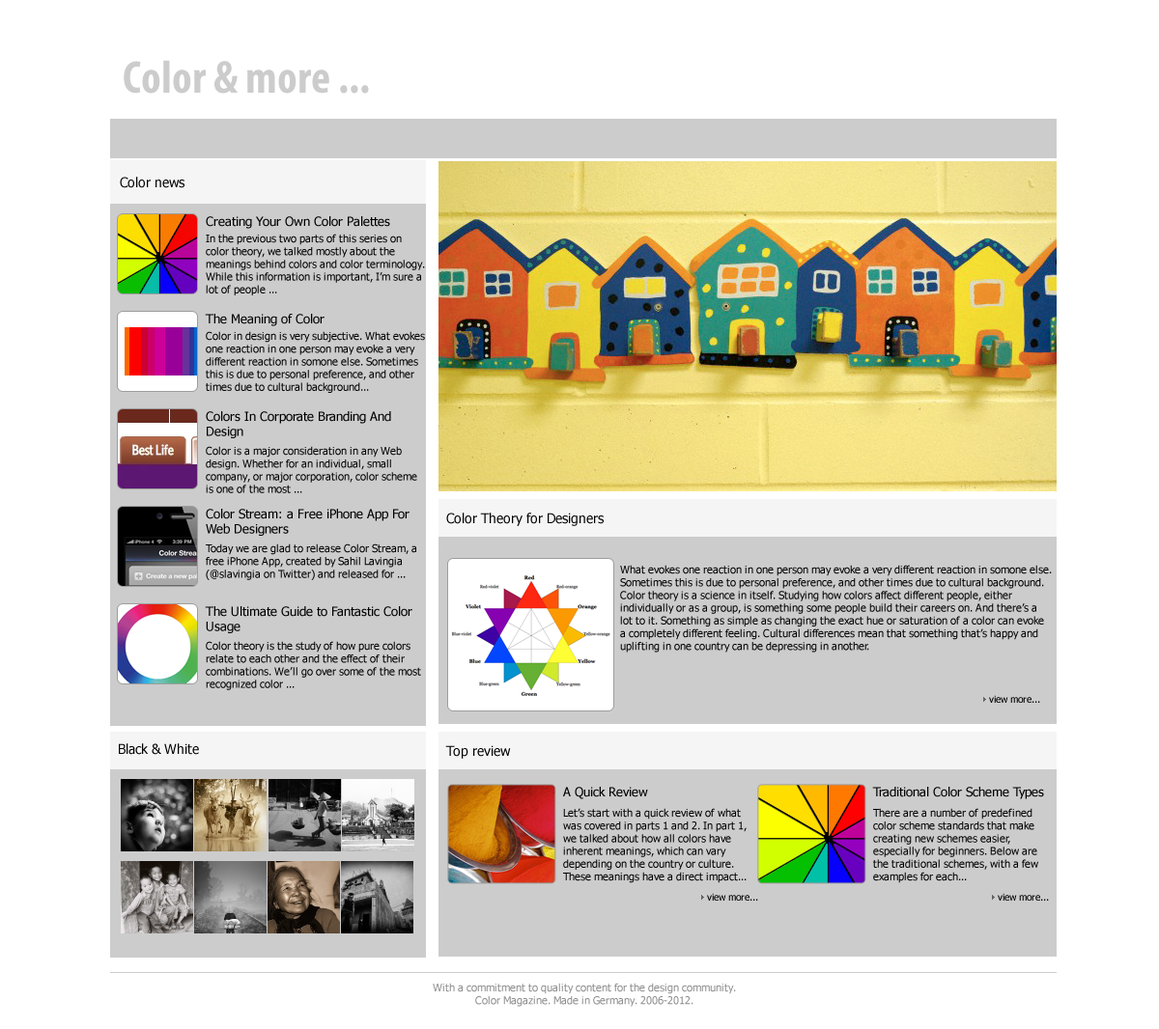
<style>
.page{position:relative;width:1159px;height:1029px;background:#ffffff}
.page>*{position:absolute;margin:0}
.t1{font:46.3px "MyriadPro-BoldCond";color:#cccccc}
.t2{font:13.5px "Tahoma";color:#000000}
.t3{font:12.6px "Tahoma";color:#000000}
.t4{font:10.6px "Tahoma";color:#000000}
.t5{font:9.7px "Tahoma";color:#000000}
.t6{font:13.5px "Tahoma";color:#020202}
.t7{font:10.6px "Tahoma";color:#8e8d8d}
</style>
<div class="page">
<p class="t1" style="left:124px;top:60px;width:245px;height:34px">Color &amp; more ...</p>
<p class="t2" style="left:120px;top:177px;width:64px;height:11px">Color news</p>
<p class="t3" style="left:206px;top:216px;width:184px;height:13px">Creating Your Own Color Palettes</p>
<p class="t4" style="left:206px;top:234px;width:219px;height:61px">In the previous two parts of this series on <br>color theory, we talked mostly about the <br>meanings behind colors and color terminology. <br>While this information is important, I’m sure a <br>lot of people ...</p>
<p class="t3" style="left:205px;top:314px;width:119px;height:12px">The Meaning of Color</p>
<p class="t4" style="left:206px;top:331px;width:219px;height:62px">Color in design is very subjective. What evokes <br>one reaction in one person may evoke a very <br>different reaction in somone else. Sometimes <br>this is due to personal preference, and other <br>times due to cultural background...</p>
<p class="t3" style="left:206px;top:411px;width:185px;height:27px">Colors In Corporate Branding And <br>Design</p>
<p class="t4" style="left:206px;top:446px;width:211px;height:47px">Color is a major consideration in any Web <br>design. Whether for an individual, small <br>company, or major corporation, color scheme <br>is one of the most ...</p>
<p class="t3" style="left:206px;top:509px;width:203px;height:27px">Color Stream: a Free iPhone App For <br>Web Designers</p>
<p class="t2" style="left:446px;top:513px;width:157px;height:13px">Color Theory for Designers</p>
<p class="t4" style="left:206px;top:544px;width:210px;height:36px">Today we are glad to release Color Stream, a <br>free iPhone App, created by Sahil Lavingia <br>(@slavingia on Twitter) and released for ...</p>
<p class="t4" style="left:620px;top:565px;width:431px;height:88px">What evokes one reaction in one person may evoke a very different reaction in somone else. <br>Sometimes this is due to personal preference, and other times due to cultural background. <br>Color theory is a science in itself. Studying how colors affect different people, either <br>individually or as a group, is something some people build their careers on. And there’s a <br>lot to it. Something as simple as changing the exact hue or saturation of a color can evoke <br>a completely different feeling. Cultural differences mean that something that’s happy and <br>uplifting in one country can be depressing in another.</p>
<p class="t3" style="left:205px;top:606px;width:207px;height:27px">The Ultimate Guide to Fantastic Color <br>Usage</p>
<p class="t4" style="left:206px;top:641px;width:215px;height:49px">Color theory is the study of how pure colors <br>relate to each other and the effect of their <br>combinations. We’ll go over some of the most <br>recognized color ...</p>
<p class="t5" style="left:989px;top:695px;width:51px;height:8px">view more...</p>
<p class="t6" style="left:119px;top:743px;width:80px;height:12px">Black &amp; White</p>
<p class="t2" style="left:445px;top:745px;width:66px;height:14px">Top review</p>
<p class="t3" style="left:563px;top:787px;width:85px;height:12px">A Quick Review</p>
<p class="t3" style="left:872px;top:787px;width:172px;height:12px">Traditional Color Scheme Types</p>
<p class="t4" style="left:563px;top:808px;width:183px;height:75px">Let’s start with a quick review of what<br>was covered in parts 1 and 2. In part 1, <br>we talked about how all colors have <br>inherent meanings, which can vary <br>depending on the country or culture. <br>These meanings have a direct impact...</p>
<p class="t4" style="left:873px;top:808px;width:165px;height:75px">There are a number of predefined <br>color scheme standards that make <br>creating new schemes easier, <br>especially for beginners. Below are <br>the traditional schemes, with a few <br>examples for each...</p>
<p class="t5" style="left:707px;top:893px;width:51px;height:8px">view more...</p>
<p class="t5" style="left:997px;top:893px;width:52px;height:8px">view more...</p>
<p class="t7" style="left:433px;top:983px;width:303px;height:24px;text-align:center">With a commitment to quality content for the design community.<br>Color Magazine. Made in Germany. 2006-2012.</p>
</div>
